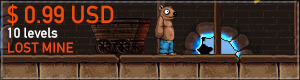
<style>
.page{position:relative;width:300px;height:80px}
.page>*{position:absolute;margin:0}
.t1{font:24.1px/14.7px "DINAlternate-Bold";color:#ed4c0c}
.t2{font:14.1px/14.7px "DINAlternate-Bold";color:#ffffff}
.t3{font:14.1px/14.7px "DINAlternate-Bold";color:#f24611}
</style>
<div class="page">
<p class="t1" style="left:7px;top:4px;width:107px;height:49px">$ 0.99 USD<br><span class="t2">10 levels<br></span><span class="t3">LOST MINE</span></p>
</div>
